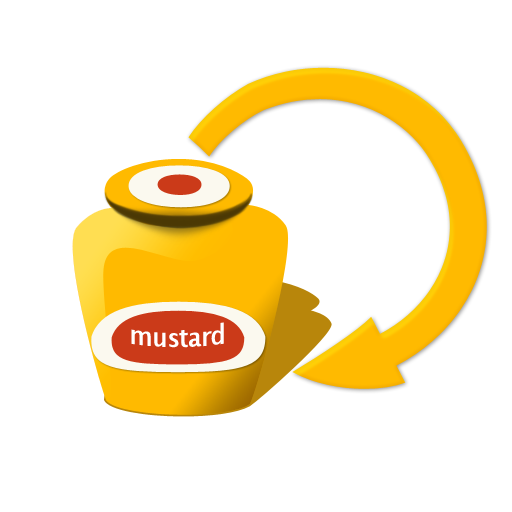
<style>
.page{position:relative;width:512px;height:512px;background:#ffffff}
.page>*{position:absolute;margin:0}
.t1{font:26.9px "LucidaGrande";letter-spacing:-0.04em;color:#ffffff;scale:0.96 1}
</style>
<div class="page">
<p class="t1" style="left:131px;top:322px;width:93px;height:26px">mustard</p>
</div>
